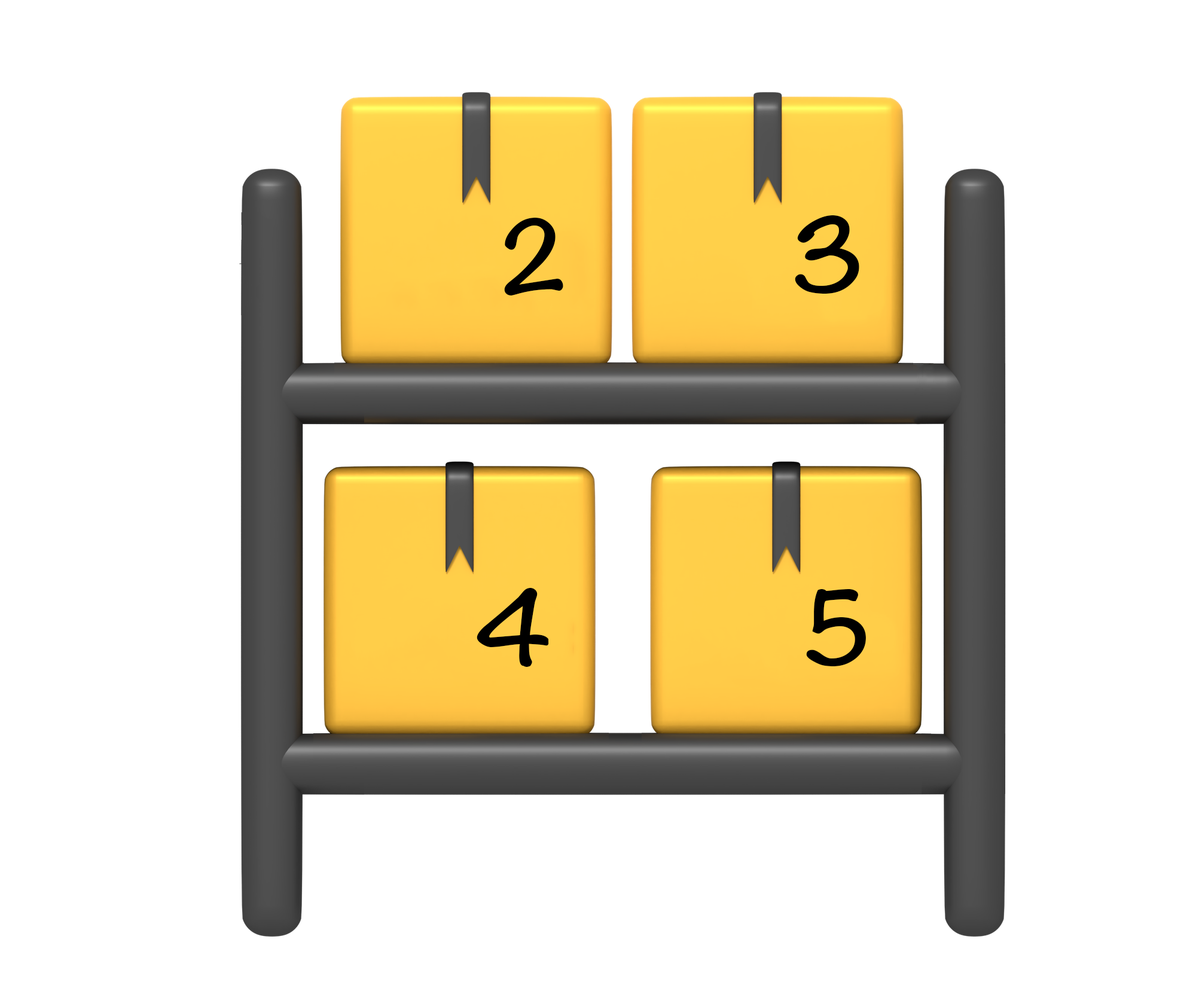
<style>
.page{position:relative;width:1196px;height:997px;background:#ffffff}
.page>*{position:absolute;margin:0}
.t1{font:89.7px "Noteworthy-Bold";color:#000000;font-variant:small-caps}
</style>
<div class="page">
<p class="t1" style="left:504px;top:218px;width:59px;height:77px">2</p>
<p class="t1" style="left:795px;top:215px;width:64px;height:79px">3</p>
<p class="t1" style="left:477px;top:588px;width:72px;height:79px">4</p>
<p class="t1" style="left:806px;top:589px;width:60px;height:77px">5</p>
</div>
